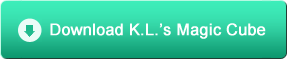
<style>
.page{position:relative;width:287px;height:59px}
.page>*{position:absolute;margin:0}
.t1{font:16px "ArialMT";color:#ffffff;font-weight:bold}
</style>
<div class="page">
<p class="t1" style="left:50px;top:23px;width:216px;height:16px">Download K.L.’s Magic Cube</p>
</div>
